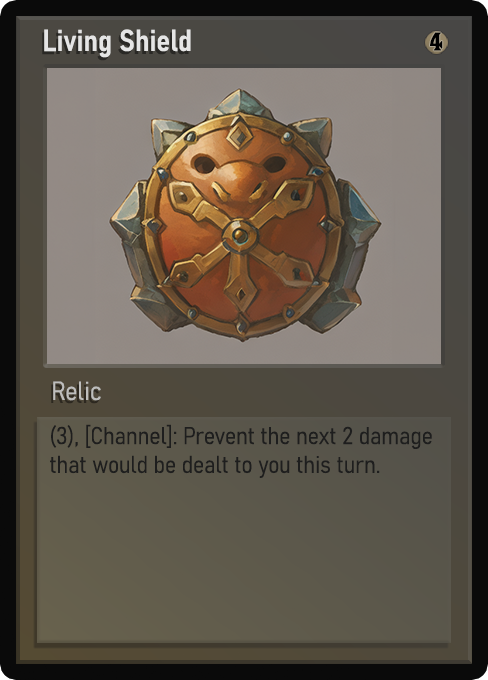
<style>
.page{position:relative;width:488px;height:680px}
.page>*{position:absolute;margin:0}
.t1{font:30px "Bahnschrift-SemiBoldSemiCondensed";color:#f2f2f2;font-weight:bold}
.t2{font:25px "WTRRoycroft";color:#000000;font-weight:bold;scale:1.09 1}
.t3{font:26px "Bahnschrift-LightSemiCondensed";color:#c8c8c8;font-weight:bold}
.t4{font:24px "Bahnschrift-LightSemiCondensed";color:#1e1e1e;font-weight:bold}
</style>
<div class="page">
<p class="t1" style="left:44px;top:29px;width:147px;height:29px;opacity:0.9">Living Shield</p>
<p class="t2" style="left:430px;top:32px;width:13px;height:19px">4</p>
<p class="t3" style="left:53px;top:381px;width:48px;height:20px;opacity:0.9">Relic</p>
<p class="t4" style="left:50px;top:424px;width:382px;height:54px">(3), [Channel]: Prevent the next 2 damage that would be dealt to you this turn.</p>
</div>
